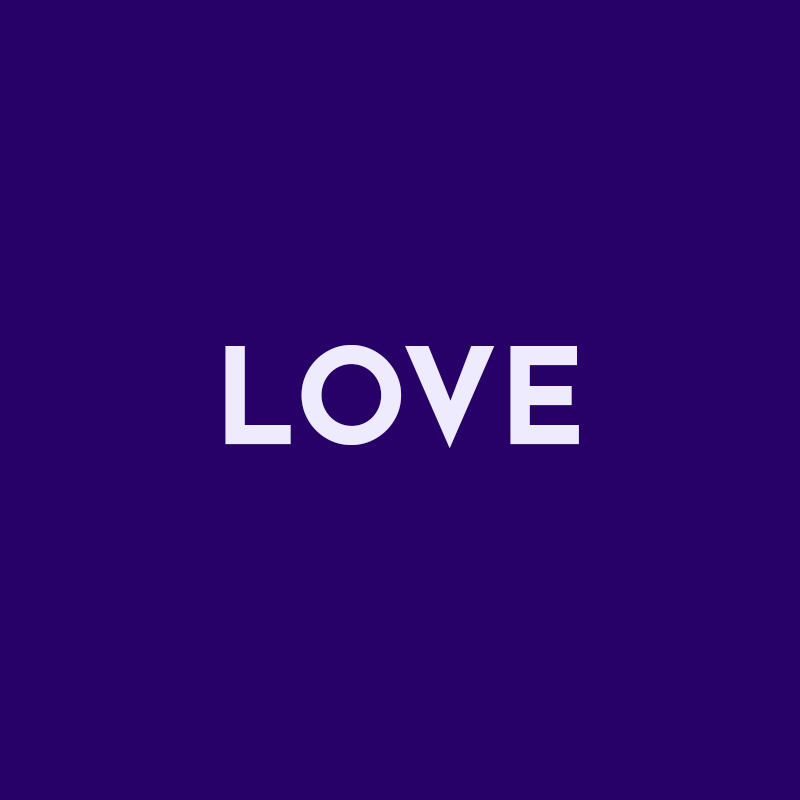
<style>
.page{position:relative;width:800px;height:800px;background:#270168}
.page>*{position:absolute;margin:0}
.t1{font:132.2px "JosefinSans-Bold";color:#efebfe}
</style>
<div class="page">
<p class="t1" style="left:225px;top:345px;width:354px;height:103px">LOVE</p>
</div>
